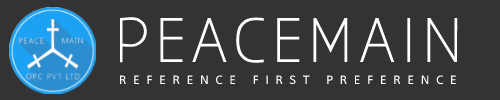
<style>
.page{position:relative;width:500px;height:100px;background:#333333}
.page>*{position:absolute;margin:0}
.t1{font:55px "AaarghNormal";letter-spacing:0.054em;color:#ffffff}
.t2{font:12px "Aan55";letter-spacing:0.28em;color:#ffffff}
</style>
<div class="page">
<p class="t1" style="left:120px;top:17px;width:338px;height:46px">PEACEMAIN</p>
<p class="t2" style="left:120px;top:75px;width:336px;height:10px">REFERENCE FIRST PREFERENCE</p>
</div>
